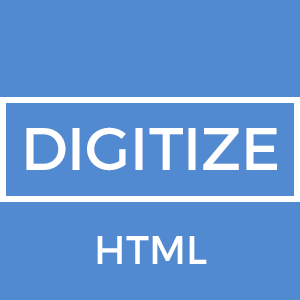
<style>
.page{position:relative;width:300px;height:300px;background:#528ad1}
.page>*{position:absolute;margin:0}
.t1{font:60px "Montserrat-Regular";color:#ffffff;text-transform:uppercase}
.t2{font:40px "Montserrat-Regular";color:#ffffff;text-transform:uppercase}
</style>
<div class="page">
<p class="t1" style="left:26px;top:127px;width:251px;height:44px">DIGITIZE</p>
<p class="t2" style="left:97px;top:236px;width:110px;height:28px">html</p>
</div>
